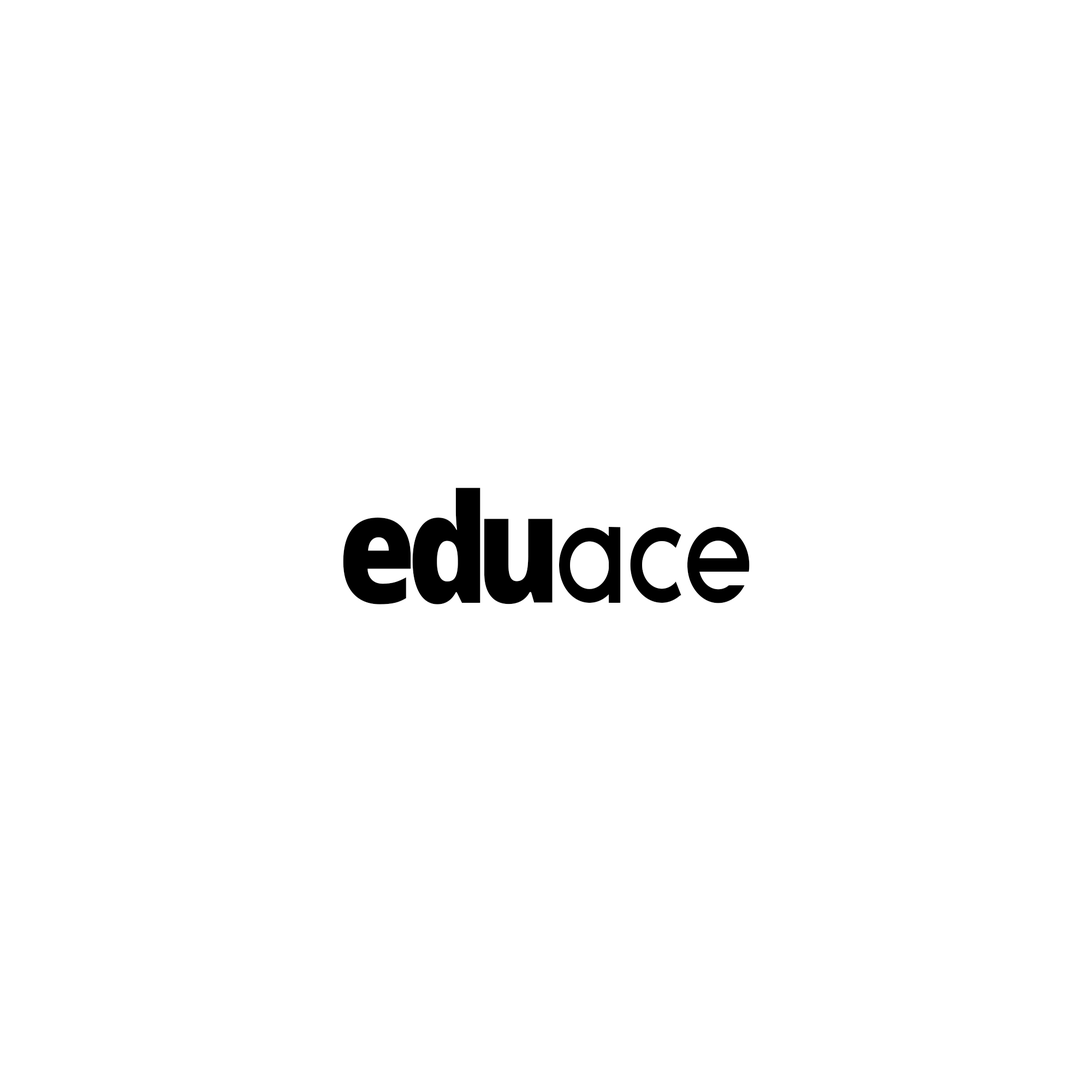
<style>
.page{position:relative;width:1092px;height:1092px;background:#ffffff}
.page>*{position:absolute;margin:0}
.t1{font:151.5px "Ikaros-Regular";letter-spacing:0.01em;color:#000000;scale:0.83 1}
.t2{font:151.5px "OpenSans-Extrabold";letter-spacing:-0.07em;color:#000000;scale:0.83 1}
.t3{font:151.5px "OpenSans-Extrabold";letter-spacing:-0.1em;color:#000000;scale:0.83 1}
.t4{font:151.5px "OpenSans-Extrabold";letter-spacing:-0.05em;color:#000000;scale:0.83 1}
</style>
<div class="page">
<p class="t1" style="left:343px;top:488px;width:407px;height:116px"><span class="t2">e</span><span class="t3">d</span><span class="t4">u</span>ace</p>
</div>
